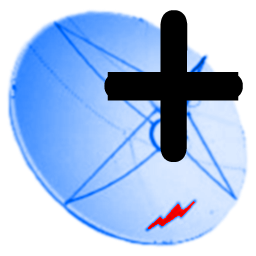
<style>
.page{position:relative;width:256px;height:256px;background:#ffffff}
.page>*{position:absolute;margin:0}
.t1{font:266.7px "CourierNewPS-BoldMT";color:#000000}
.t2{font:312.5px "CourierNewPS-BoldMT";color:#000000}
</style>
<div class="page">
<p class="t1" style="left:104px;top:10px;width:139px;height:152px">+</p>
<p class="t2" style="left:107px;top:72px;width:132px;height:29px">-</p>
</div>
